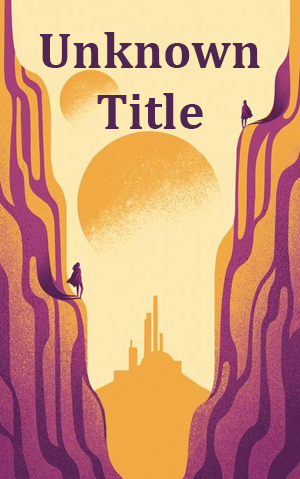
<style>
.page{position:relative;width:300px;height:479px}
.page>*{position:absolute;margin:0}
.t1{font:50.5px "Cambria-Bold";color:#502552}
</style>
<div class="page">
<p class="t1" style="left:39px;top:32px;width:221px;height:97px;text-align:center">Unknown<br>Title</p>
</div>
